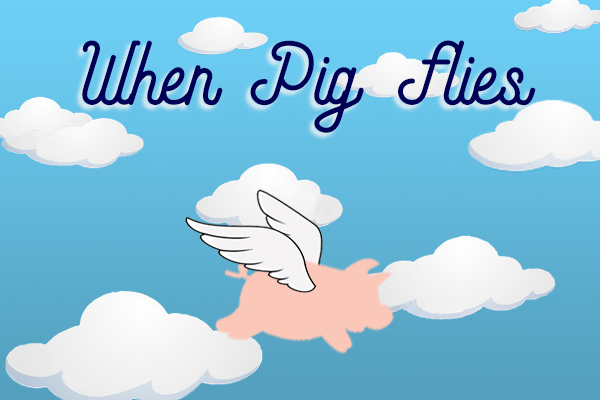
<style>
.page{position:relative;width:600px;height:400px}
.page>*{position:absolute;margin:0}
.t1{font:71.1px "AndaraScript-Soft";color:#000057}
.t2{font:71.1px "AndaraScript-Soft";letter-spacing:0.1em;color:#000057}
</style>
<div class="page">
<p class="t1" style="left:82px;top:40px;width:454px;height:93px">When Pig <span class="t2">F</span>lies</p>
</div>
